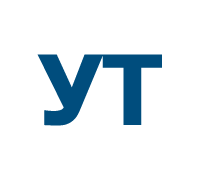
<style>
.page{position:relative;width:200px;height:170px;background:#ffffff}
.page>*{position:absolute;margin:0}
.t1{font:97px "Tahoma-Bold";color:#004d7d}
</style>
<div class="page">
<p class="t1" style="left:37px;top:54px;width:125px;height:72px">УТ</p>
</div>
